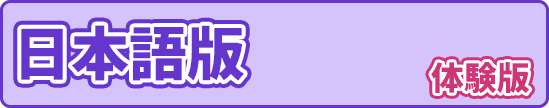
<style>
.page{position:relative;width:549px;height:108px;background:#d5c4fb}
.page>*{position:absolute;margin:0}
.t1{font:57.7px "MochiyPopOne-Regular";color:#6436ce}
.t2{font:32.8px "MochiyPopOne-Regular";color:#ce3677}
</style>
<div class="page">
<p class="t1" style="left:21px;top:25px;width:223px;height:56px">日本語版</p>
<p class="t2" style="left:431px;top:62px;width:99px;height:32px">体験版</p>
</div>
